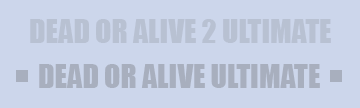
<style>
.page{position:relative;width:360px;height:108px;background:#ccd6eb}
.page>*{position:absolute;margin:0}
.t1{font:30px "Impact";color:#a8afbe}
</style>
<div class="page">
<p class="t1" style="left:30px;top:19px;width:301px;height:24px;opacity:0.55">DEAD OR ALIVE 2 ULTIMATE</p>
<p class="t1" style="left:39px;top:64px;width:281px;height:24px">DEAD OR ALIVE ULTIMATE</p>
</div>
